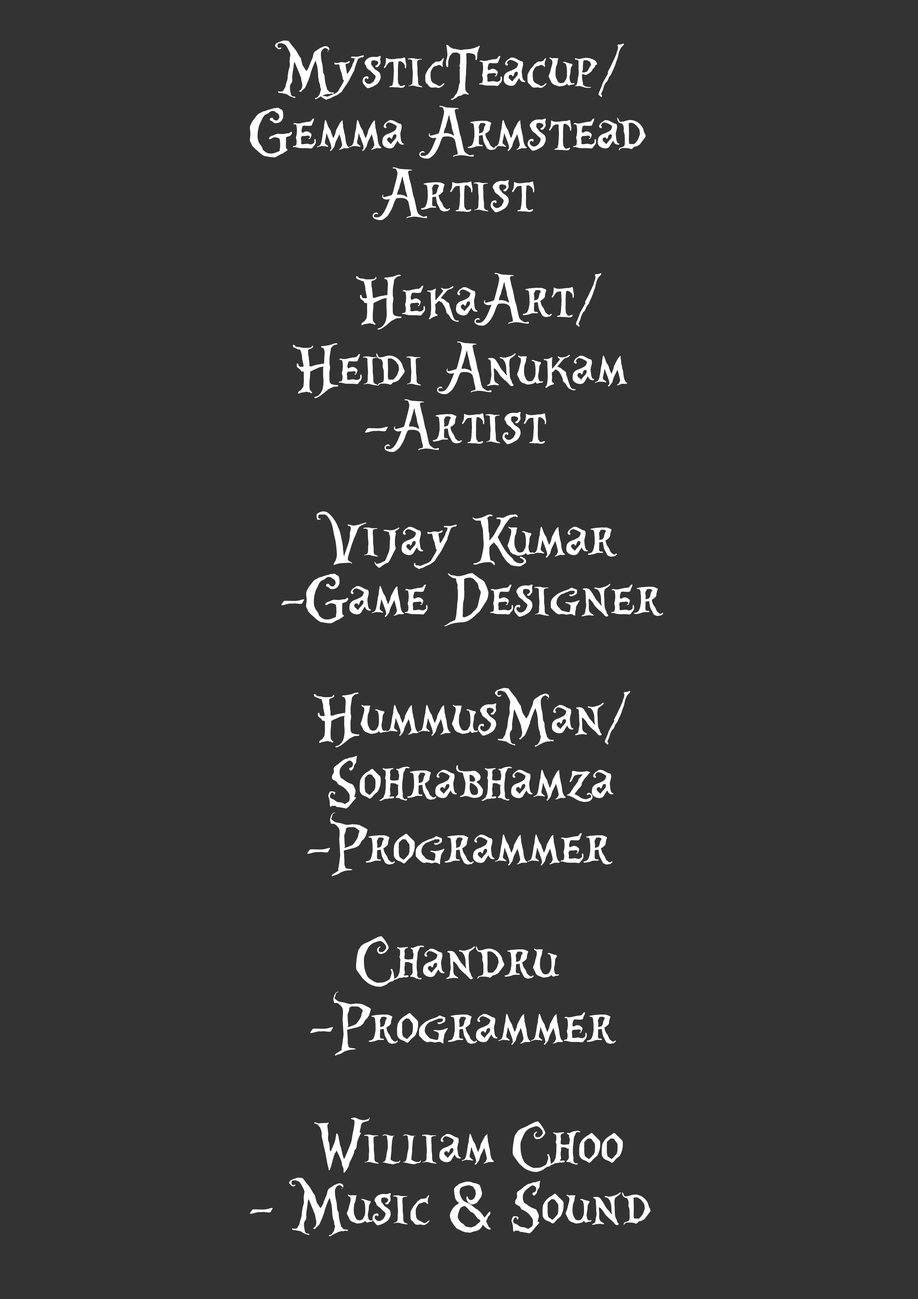
<style>
.page{position:relative;width:918px;height:1299px;background:#333333}
.page>*{position:absolute;margin:0}
.t1{font:74.1px "AliceinWonderland";color:#ffffff}
</style>
<div class="page">
<p class="t1" style="left:275px;top:40px;width:349px;height:60px">MysticTeacup/</p>
<p class="t1" style="left:250px;top:106px;width:396px;height:53px">Gemma Armstead</p>
<p class="t1" style="left:372px;top:167px;width:163px;height:53px">Artist</p>
<p class="t1" style="left:356px;top:273px;width:246px;height:57px">HekaArt/</p>
<p class="t1" style="left:293px;top:341px;width:335px;height:57px">Heidi Anukam</p>
<p class="t1" style="left:365px;top:399px;width:182px;height:53px">-Artist</p>
<p class="t1" style="left:317px;top:511px;width:300px;height:58px">Vijay Kumar</p>
<p class="t1" style="left:281px;top:573px;width:383px;height:53px">-Game Designer</p>
<p class="t1" style="left:314px;top:688px;width:317px;height:59px">HummusMan/</p>
<p class="t1" style="left:328px;top:755px;width:286px;height:53px">Sohrabhamza</p>
<p class="t1" style="left:307px;top:812px;width:306px;height:64px">-Programmer</p>
<p class="t1" style="left:314px;top:1117px;width:309px;height:55px">William Choo</p>
<p class="t1" style="left:250px;top:1177px;width:401px;height:59px">- Music &amp; Sound</p>
</div>
